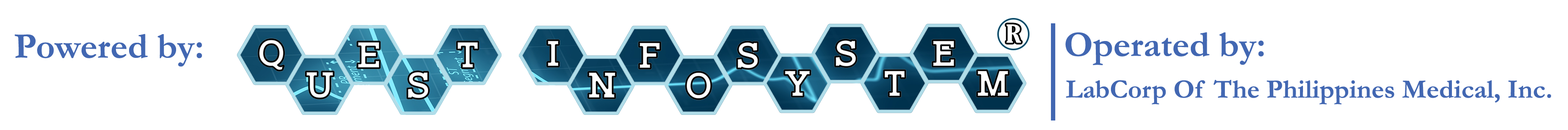
<style>
.page{position:relative;width:1568px;height:130px;background:#ffffff}
.page>*{position:absolute;margin:0}
.t1{font:24px "GloucesterMT-ExtraCondensed";color:#ffffff;scale:1.52 1}
.t2{font:36.4px "Garamond-Bold";color:#4267b2}
.t3{font:26.7px "Garamond-Bold";color:#4267b2}
</style>
<div class="page">
<p class="t1" style="left:1006px;top:24px;width:15px;height:19px">R</p>
<p class="t2" style="left:15px;top:34px;width:187px;height:32px">Powered by:</p>
<p class="t2" style="left:1065px;top:32px;width:199px;height:33px">Operated by:</p>
<p class="t3" style="left:1066px;top:80px;width:485px;height:24px">LabCorp Of The Philippines Medical, Inc.</p>
</div>
